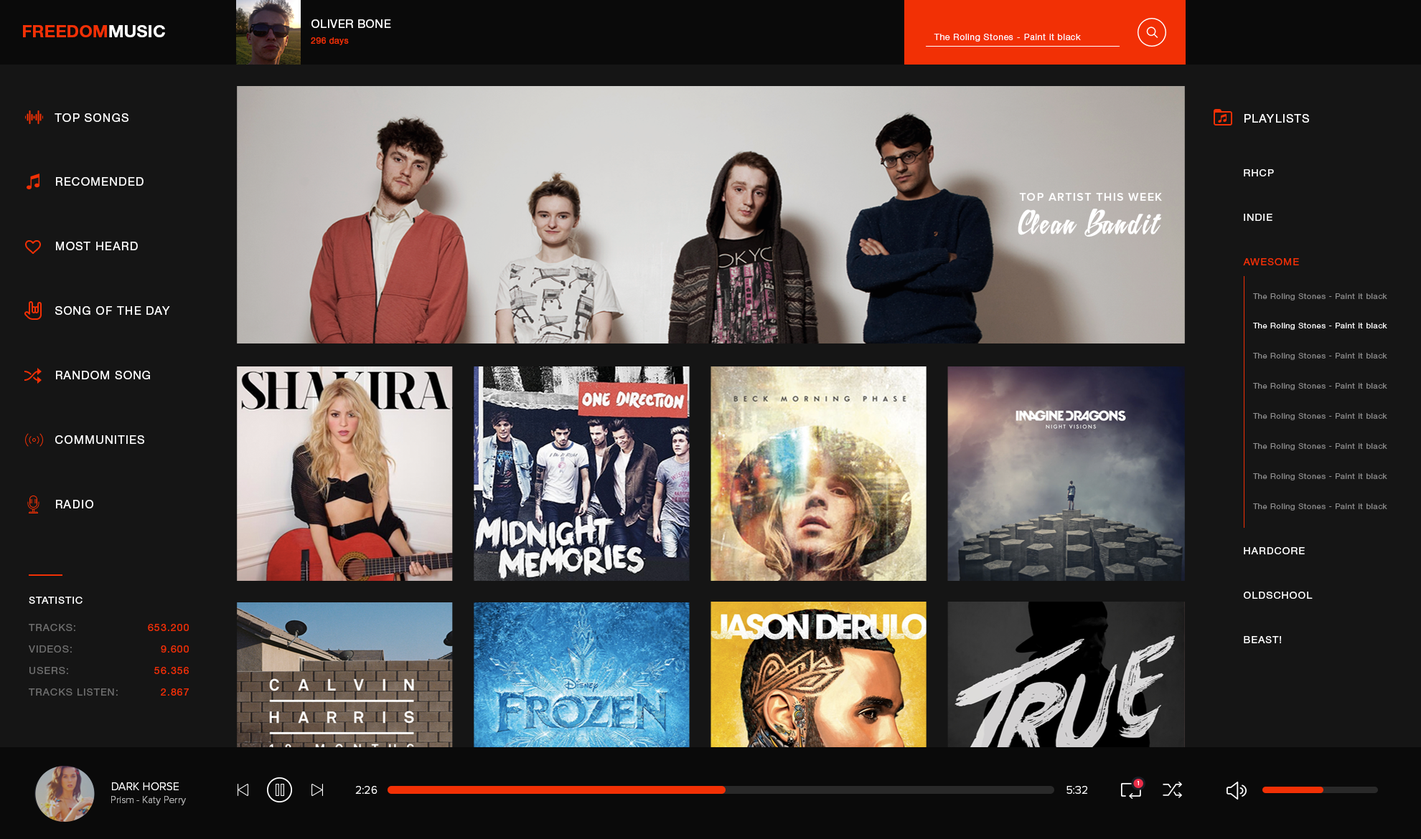
<style>
.page{position:relative;width:1421px;height:839px;background:#151515}
.page>*{position:absolute;margin:0}
.t1{font:17.1px "HelveticaNeueCyr-Bold";color:#f23005;text-transform:uppercase}
.t2{font:17.1px "HelveticaNeueCyr-Bold";color:#ffffff;text-transform:uppercase}
.t3{font:11.5px/15.8px "HelveticaNeueCyr-Roman";letter-spacing:0.04em;color:#ffffff;text-transform:uppercase}
.t4{font:8.6px/15.8px "HelveticaNeueCyr-Roman";letter-spacing:0.04em;color:#f23005;text-transform:uppercase}
.t5{font:8.6px/15.8px "HelveticaNeueCyr-Roman";letter-spacing:0.04em;color:#f23005}
.t6{font:8.6px "HelveticaNeueCyr-Light";letter-spacing:0.08em;color:#ffffff}
.t7{font:11.5px/32.3px "HelveticaNeueCyr-Roman";letter-spacing:0.08em;color:#ffffff;text-transform:uppercase}
.t8{font:10px/22.2px "HelveticaNeueCyr-Roman";letter-spacing:0.08em;color:#ffffff;text-transform:uppercase}
.t9{font:10px/22.2px "HelveticaNeueCyr-Roman";letter-spacing:0.08em;color:#f23005;text-transform:uppercase}
.t10{font:11.5px "ProximaNova-Semibold";letter-spacing:0.083em;color:#ffffff;text-transform:uppercase}
.t11{font:24.2px "LetristaScript";letter-spacing:0.083em;color:#ffffff}
.t12{font:7.9px/15.1px "HelveticaNeueCyr-Light";letter-spacing:0.08em;color:#8c8c8c}
.t13{font:7.9px/15.1px "HelveticaNeueCyr-Light";letter-spacing:0.08em;color:#ffffff}
.t14{font:10px "HelveticaNeueCyr-Roman";letter-spacing:0.08em;color:#ffffff;text-transform:uppercase}
.t15{font:10px/21.5px "HelveticaNeueCyr-Roman";letter-spacing:0.08em;color:#6e6e6e;text-transform:uppercase}
.t16{font:10px/21.5px "HelveticaNeueCyr-Roman";letter-spacing:0.08em;color:#f23005;text-transform:uppercase}
.t17{font:11.5px "ProximaNova-Light";color:#ffffff;text-transform:uppercase}
.t18{font:10px "ProximaNova-Light";color:#b3b3b3}
.t19{font:11.5px "ProximaNova-Light";color:#ffffff}
</style>
<div class="page">
<p class="t1" style="left:23px;top:25px;width:142px;height:12px">freedom<span class="t2">music</span></p>
<p class="t3" style="left:311px;top:19px;width:80px;height:26px">Oliver bone<br><span class="t4">296 </span><span class="t5">days</span></p>
<p class="t6" style="left:933px;top:34px;width:147px;height:8px">The Roling Stones - Paint it black</p>
<p class="t7" style="left:55px;top:113px;width:115px;height:396px">top songs<br><br>recomended<br><br>most heard<br><br>song of the day<br><br>random song<br><br>communities<br><br>radio</p>
<p class="t8" style="left:1243px;top:114px;width:69px;height:530px"><span class="t7">playlists<br><br></span>RHCP<br><br>Indie<br><br><span class="t9">Awesome<br></span><br><br><br><br><br><br><br><br><br><br><br><br>Hardcore<br><br>oldschool<br><br>beast!</p>
<p class="t10" style="left:1019px;top:193px;width:143px;height:8px">top artist this week</p>
<p class="t11" style="left:1017px;top:209px;width:144px;height:28px">Clean Bandit</p>
<p class="t12" style="left:1253px;top:293px;width:134px;height:218px">The Roling Stones - Paint it black<br><br><span class="t13">The Roling Stones - Paint it black<br><br></span>The Roling Stones - Paint it black<br><br>The Roling Stones - Paint it black<br><br>The Roling Stones - Paint it black<br><br>The Roling Stones - Paint it black<br><br>The Roling Stones - Paint it black<br><br>The Roling Stones - Paint it black</p>
<p class="t14" style="left:29px;top:597px;width:54px;height:7px">statistic</p>
<p class="t15" style="left:29px;top:624px;width:89px;height:72px">tracks:                 <br>videos:                   <br>users:                    <br>tracks listen:</p>
<p class="t16" style="left:148px;top:624px;width:41px;height:72px;text-align:right">653.200<br>9.600<br>56.356<br>2.867</p>
<p class="t17" style="left:112px;top:783px;width:67px;height:8px">Dark Horse</p>
<p class="t18" style="left:111px;top:796px;width:75px;height:10px">Prism - Katy Perry</p>
<p class="t19" style="left:355px;top:786px;width:22px;height:8px">2:26</p>
<p class="t19" style="left:1066px;top:786px;width:21px;height:8px">5:32</p>
</div>
